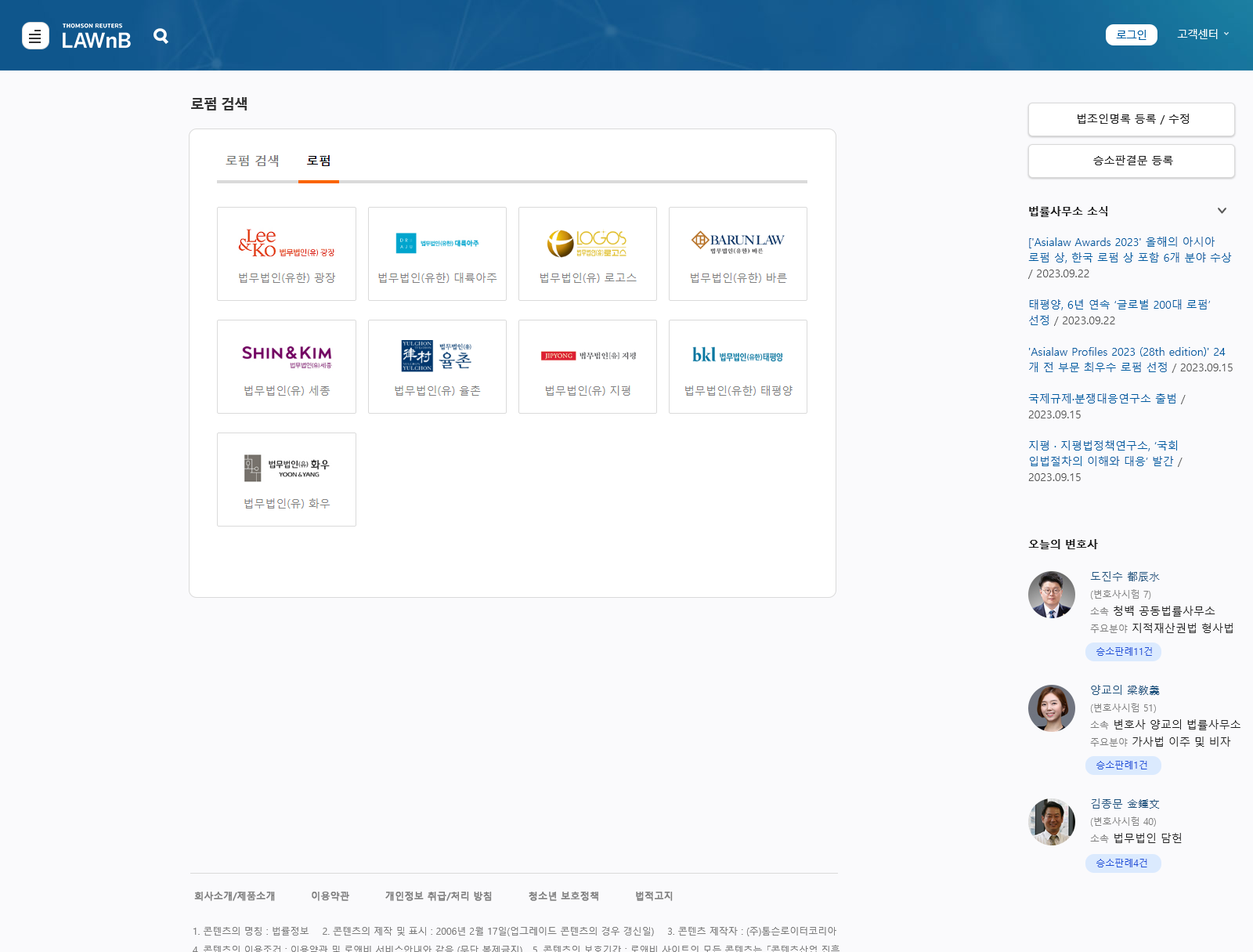
<style>
.page{position:relative;width:1253px;height:952px;background:#fafafc}
.page>*{position:absolute;margin:0}
.t1{font:14.1px "MalgunGothicBold";letter-spacing:-0.06em;color:#333333}
.t2{font:11px "MalgunGothic";color:#212121}
.t3{font:11px "MalgunGothicBold";color:#212121}
.t4{font:11px/15.7px "MalgunGothic";color:#005da2}
.t5{font:11px/15.7px "MalgunGothic";color:#585858}
.t6{font:9.4px/17.2px "MalgunGothic";color:#7f7f7f}
.t7{font:11px/17.2px "MalgunGothic";color:#20547f}
.t8{font:11px/17.2px "MalgunGothic";color:#212121}
.t9{font:9.4px "MalgunGothic";color:#1d4ed8}
.t10{font:9.4px "MalgunGothic";color:#7f7f7f;font-weight:bold}
</style>
<div class="page">
<p class="t1" style="left:191px;top:97px;width:56px;height:13px">로펌 검색</p>
<p class="t2" style="left:1078px;top:114px;width:111px;height:11px">법조인명록 등록 / 수정</p>
<p class="t2" style="left:1093px;top:155px;width:80px;height:10px">승소판결문 등록</p>
<p class="t3" style="left:1029px;top:206px;width:78px;height:11px">법률사무소 소식</p>
<p class="t4" style="left:1028px;top:237px;width:205px;height:244px">['Asialaw Awards 2023' 올해의 아시아 로펌 상, 한국 로펌 상 포함 6개 분야 수상 <span class="t5">/ 2023.09.22<br></span><br>태평양, 6년 연속 ‘글로벌 200대 로펌’ 선정 <span class="t5">/ 2023.09.22<br></span><br>'Asialaw Profiles 2023 (28th edition)' 24개 전 부문 최우수 로펌 선정 <span class="t5">/ 2023.09.15<br></span><br>국제규제·분쟁대응연구소 출범 <span class="t5">/ 2023.09.15<br></span><br>지평 · 지평법정책연구소, ‘국회 입법절차의 이해와 대응’ 발간<span class="t5"> / 2023.09.15</span></p>
<p class="t3" style="left:1028px;top:539px;width:70px;height:10px">오늘의 변호사</p>
<p class="t6" style="left:1090px;top:571px;width:143px;height:62px"><span class="t7">도진수 都辰水<br></span>(변호사시험 7)<br>소속<span class="t8"> 청백 공동법률사무소<br></span>주요분야<span class="t8"> 지적재산권법 형사법</span></p>
<p class="t9" style="left:1096px;top:647px;width:56px;height:9px">승소판례11건</p>
<p class="t6" style="left:1090px;top:685px;width:151px;height:61px"><span class="t7">양교의 梁敎義 <br></span>(변호사시험 51)<br>소속<span class="t8"> 변호사 양교의 법률사무소<br></span>주요분야<span class="t8"> 가사법 이주 및 비자</span></p>
<p class="t9" style="left:1096px;top:760px;width:51px;height:9px">승소판례1건</p>
<p class="t6" style="left:1090px;top:798px;width:92px;height:45px"><span class="t7">김종문 金鍾文 <br></span>(변호사시험 40)<br>소속<span class="t8"> 법무법인 담헌</span></p>
<p class="t9" style="left:1096px;top:858px;width:51px;height:9px">승소판례4건</p>
<p class="t10" style="left:194px;top:890px;width:479px;height:11px">회사소개/제품소개          이용약관          개인정보 취급/처리 방침          청소년 보호정책          법적고지</p>
</div>
